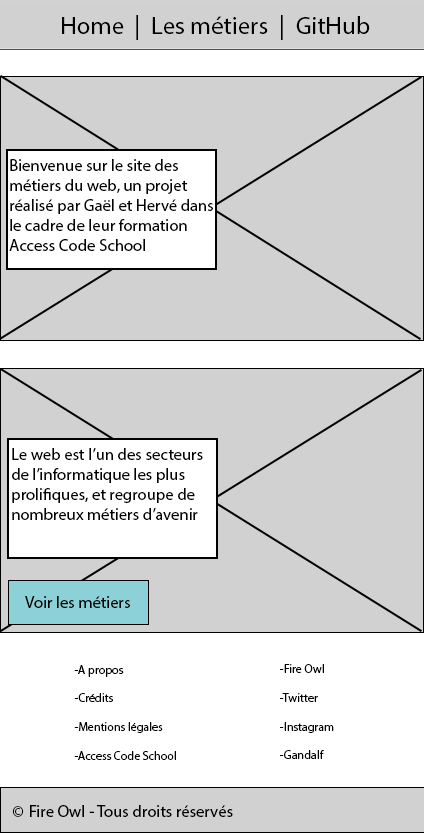
<style>
.page{position:relative;width:424px;height:833px;background:#d2d1d1}
.page>*{position:absolute;margin:0}
.t1{font:25px "MyriadPro-Regular";color:#000000}
.t2{font:16.7px "MyriadPro-Regular";color:#000000}
.t3{font:12px "MyriadPro-Regular";color:#000000}
</style>
<div class="page">
<p class="t1" style="left:62px;top:15px;width:308px;height:25px">Home  |  Les métiers  |  GitHub</p>
<p class="t2" style="left:9px;top:159px;width:204px;height:92px">Bienvenue sur le site des métiers du web, un projet réalisé par Gaël et Hervé dans le cadre de leur formation Access Code School</p>
<p class="t2" style="left:12px;top:448px;width:191px;height:72px">Le web est l’un des secteurs <br>de l’informatique les plus prolifiques, et regroupe de nombreux métiers d’avenir</p>
<p class="t2" style="left:25px;top:596px;width:105px;height:12px">Voir les métiers</p>
<p class="t3" style="left:74px;top:665px;width:102px;height:95px">-A propos<br><br>-Crédits<br><br>-Mentions légales<br><br>-Access Code School</p>
<p class="t3" style="left:280px;top:664px;width:54px;height:95px">-Fire Owl<br><br>-Twitter<br><br>-Instagram<br><br>-Gandalf</p>
<p class="t2" style="left:12px;top:805px;width:221px;height:12px">© Fire Owl - Tous droits réservés</p>
</div>
